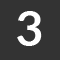
<style>
.page{position:relative;width:60px;height:60px;background:#333333}
.page>*{position:absolute;margin:0}
.t1{font:48px "Lato-Bold";color:#fffefe}
</style>
<div class="page">
<p class="t1" style="left:17px;top:11px;width:25px;height:35px">3</p>
</div>
